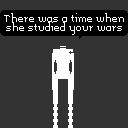
<style>
.page{position:relative;width:128px;height:128px;background:#333333}
.page>*{position:absolute;margin:0}
.t1{font:8px "Memoria";color:#ffffff}
</style>
<div class="page">
<p class="t1" style="left:4px;top:13px;width:120px;height:22px;text-align:center">There was a time when<br>she studied your wars</p>
</div>
